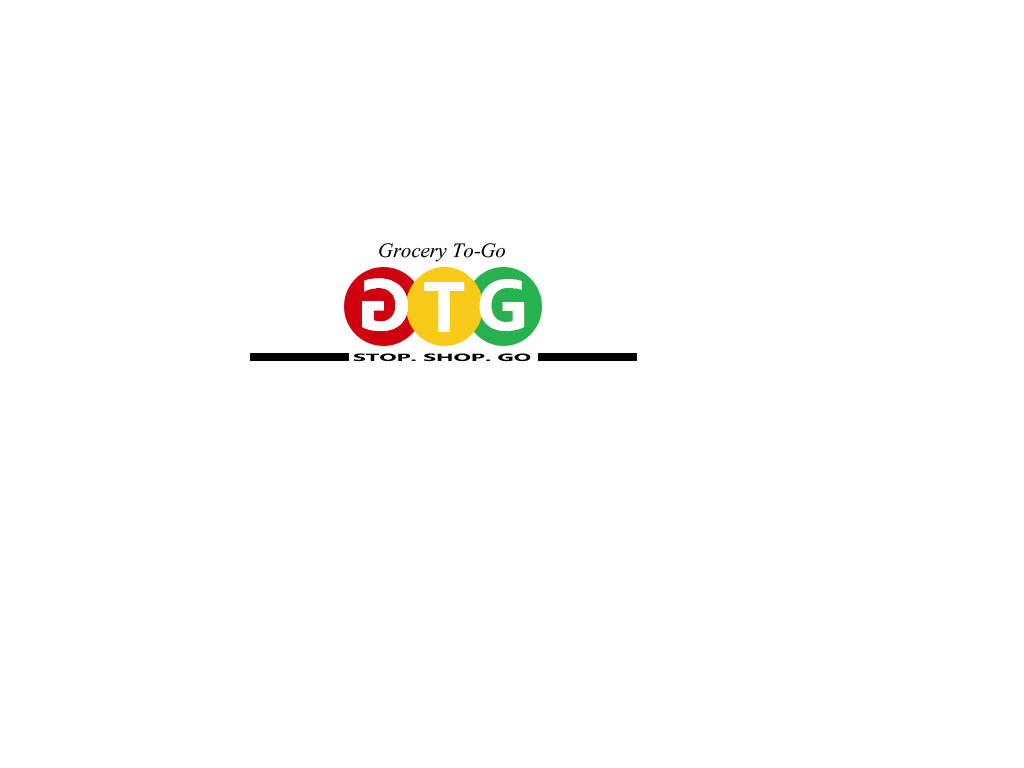
<style>
.page{position:relative;width:1024px;height:768px;background:#ffffff}
.page>*{position:absolute;margin:0}
.t1{font:31px "AngsanaNew-Italic";color:#000000}
.t2{font:72.1px "Ebrima-Bold";color:#ffffff}
.t3{font:10.4px "Ebrima-Bold";color:#010101;scale:2.19 1}
</style>
<div class="page">
<p class="t1" style="left:379px;top:243px;width:127px;height:19px">Grocery To-Go</p>
<p class="t2" style="left:362px;top:278px;width:46px;height:53px;rotate:180deg">G</p>
<p class="t2" style="left:362px;top:278px;width:46px;height:53px;rotate:180deg">G</p>
<p class="t2" style="left:479px;top:279px;width:46px;height:52px">G</p>
<p class="t2" style="left:424px;top:282px;width:41px;height:50px">T</p>
<p class="t3" style="left:354px;top:353px;width:177px;height:9px">STOP. SHOP. GO</p>
</div>
